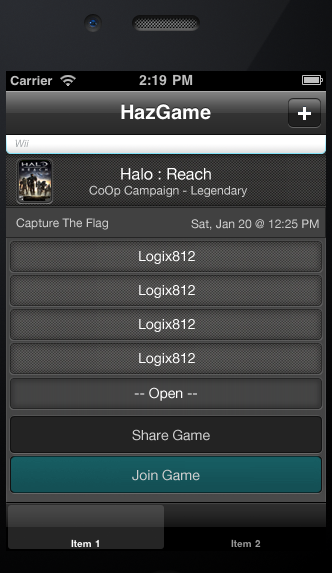
<style>
.page{position:relative;width:332px;height:573px}
.page>*{position:absolute;margin:0}
.t1{font:10px "HelveticaNeue-Italic";color:#a3a7aa}
.t2{font:16px "HelveticaNeue";color:#ffffff}
.t3{font:12px "HelveticaNeue";color:#cecece}
.t4{font:14px "HelveticaNeue";color:#ffffff}
.t5{font:14px "HelveticaNeue";color:#cecece}
</style>
<div class="page">
<p class="t1" style="left:15px;top:139px;width:14px;height:8px">Wii</p>
<p class="t2" style="left:121px;top:168px;width:90px;height:12px">Halo : Reach</p>
<p class="t3" style="left:89px;top:185px;width:159px;height:12px">CoOp Campaign - Legendary</p>
<p class="t3" style="left:16px;top:218px;width:92px;height:12px">Capture The Flag</p>
<p class="t3" style="left:191px;top:219px;width:128px;height:11px">Sat, Jan 20 @ 12:25 PM</p>
<p class="t4" style="left:139px;top:251px;width:56px;height:13px">Logix812</p>
<p class="t4" style="left:139px;top:285px;width:56px;height:13px">Logix812</p>
<p class="t4" style="left:139px;top:319px;width:56px;height:13px">Logix812</p>
<p class="t4" style="left:139px;top:353px;width:56px;height:13px">Logix812</p>
<p class="t4" style="left:134px;top:387px;width:63px;height:14px">-- Open --</p>
<p class="t5" style="left:132px;top:429px;width:78px;height:12px">Share Game</p>
<p class="t5" style="left:132px;top:469px;width:68px;height:12px">Join Game</p>
</div>
